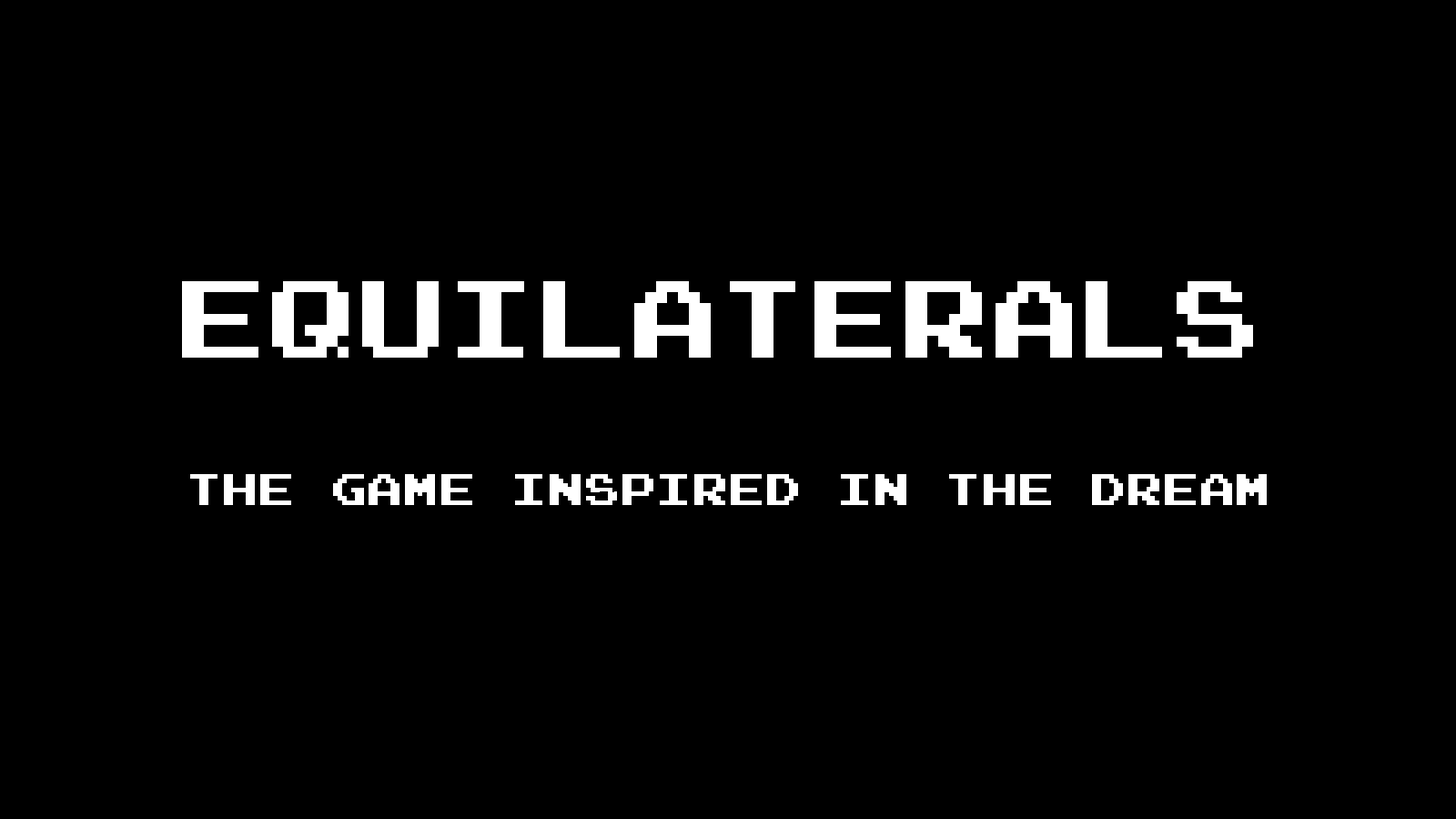
<style>
.page{position:relative;width:1456px;height:819px;background:#000000}
.page>*{position:absolute;margin:0}
.t1{font:109.2px "JoystixMonospace-Regular";color:#ffffff}
.t2{font:43.7px "JoystixMonospace-Regular";color:#ffffff}
</style>
<div class="page">
<p class="t1" style="left:182px;top:281px;width:1071px;height:77px">Equilaterals</p>
<p class="t2" style="left:190px;top:474px;width:1077px;height:31px">the game inspired in the dream</p>
</div>
